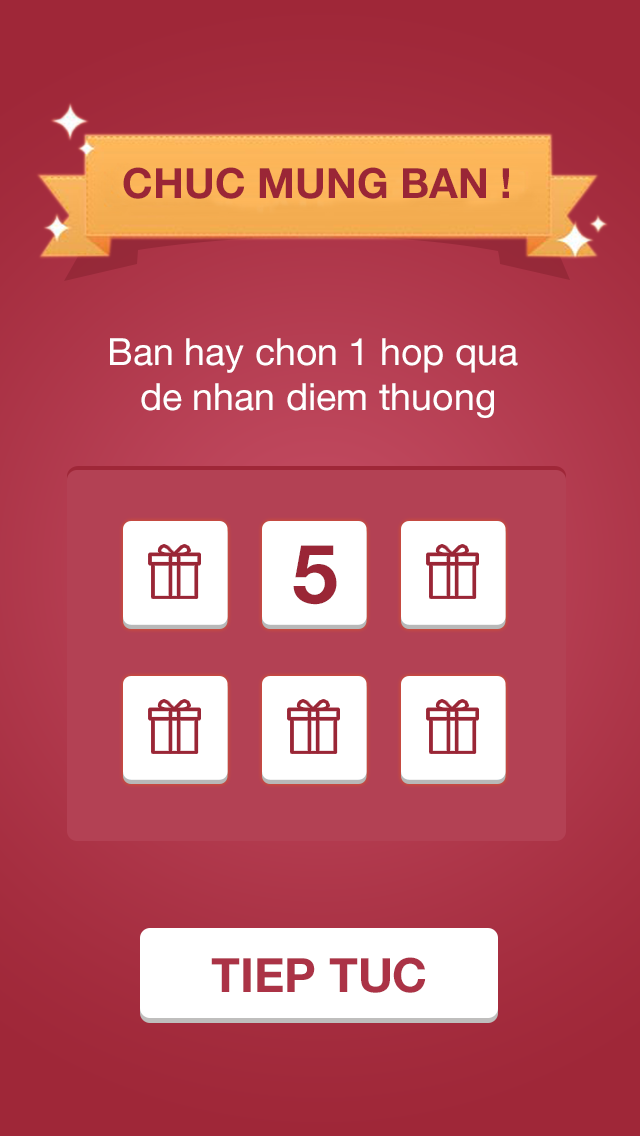
<style>
.page{position:relative;width:640px;height:1136px}
.page>*{position:absolute;margin:0}
.t1{font:41.7px "HelveticaNeueLTStd-Bd";color:#9a2636}
.t2{font:37.5px "HelveticaNeueLTStd-Roman";color:#ffffff}
.t3{font:82px "HelveticaNeueLTStd-Bd";color:#9a2636}
.t4{font:47.2px "HelveticaNeueLTStd-Bd";color:#9a2636}
</style>
<div class="page">
<p class="t1" style="left:123px;top:167px;width:386px;height:32px">CHUC MUNG BAN !</p>
<p class="t2" style="left:110px;top:338px;width:408px;height:80px;text-align:center">Ban hay chon 1 hop qua <br>de nhan diem thuong</p>
<p class="t3" style="left:293px;top:545px;width:44px;height:60px">5</p>
<p class="t4" style="left:211px;top:957px;width:215px;height:36px">TIEP TUC</p>
</div>
